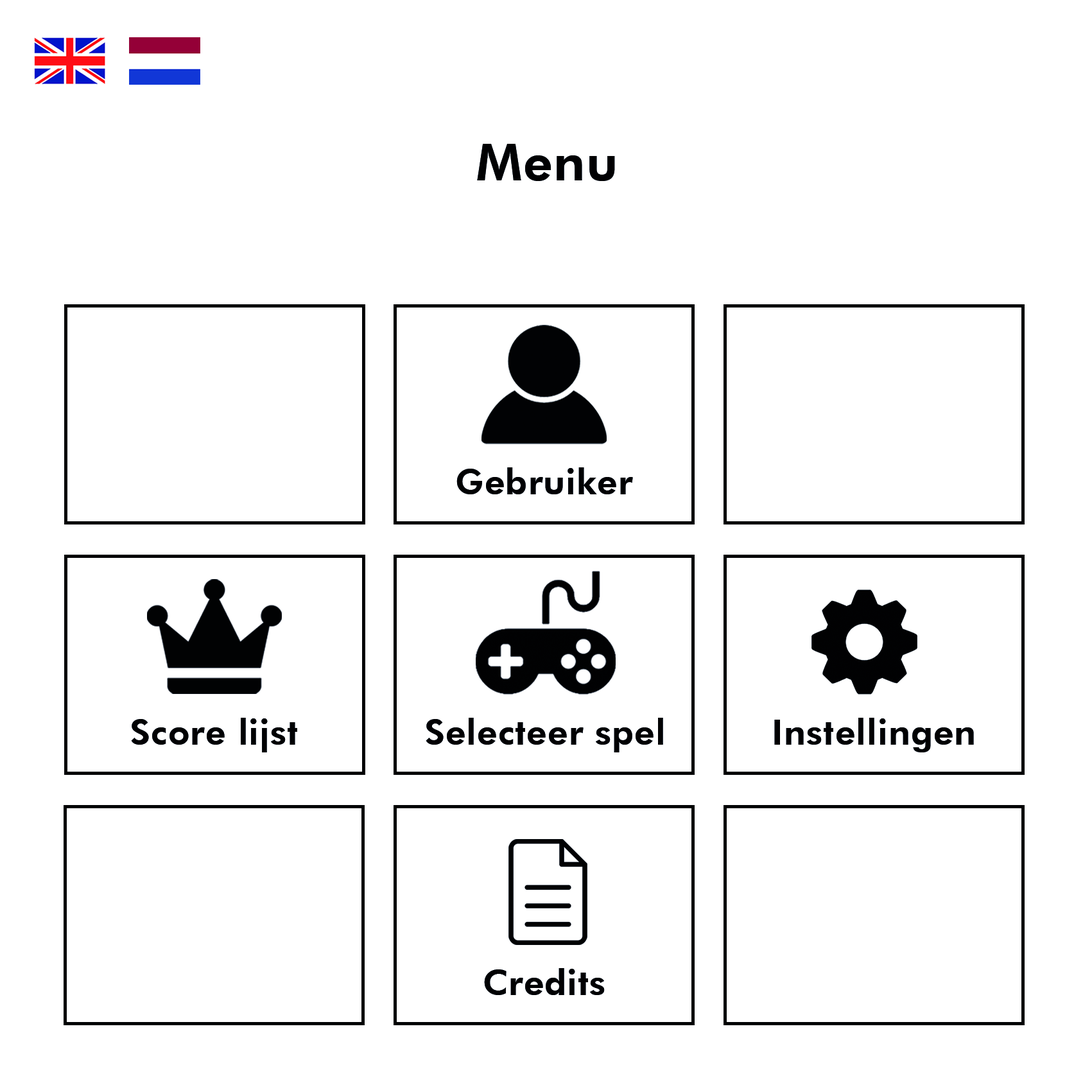
<style>
.page{position:relative;width:1092px;height:1092px;background:#ffffff}
.page>*{position:absolute;margin:0}
.t1{font:51.4px "FuturaBT-Heavy";letter-spacing:0.02em;color:#010102}
.t2{font:35.3px "FuturaBT-Heavy";letter-spacing:0.02em;color:#010102}
</style>
<div class="page">
<p class="t1" style="left:477px;top:144px;width:138px;height:37px">Menu</p>
<p class="t2" style="left:456px;top:467px;width:177px;height:27px">Gebruiker</p>
<p class="t2" style="left:131px;top:718px;width:166px;height:34px">Score lijst</p>
<p class="t2" style="left:426px;top:718px;width:237px;height:34px">Selecteer spel</p>
<p class="t2" style="left:774px;top:718px;width:200px;height:34px">Instellingen</p>
<p class="t2" style="left:484px;top:968px;width:121px;height:27px">Credits</p>
</div>
